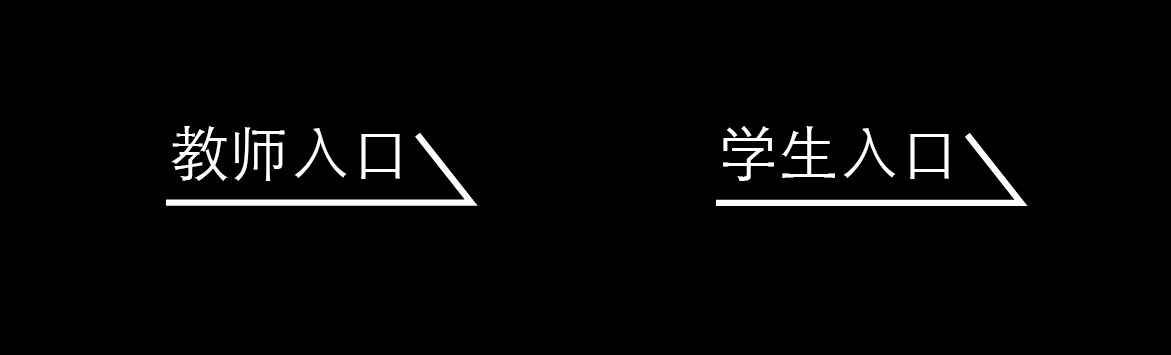
<style>
.page{position:relative;width:1171px;height:355px;background:#000000}
.page>*{position:absolute;margin:0}
.t1{font:60.3px "STHeitiSC-Light";letter-spacing:0.02em;color:#ffffff}
</style>
<div class="page">
<p class="t1" style="left:171px;top:126px;width:229px;height:55px">教师入口</p>
<p class="t1" style="left:723px;top:126px;width:226px;height:55px">学生入口</p>
</div>
